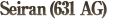
<style>
.page{position:relative;width:118px;height:19px;background:#ffffff}
.page>*{position:absolute;margin:0}
.t1{font:18px "RyuminPro-ExBold";letter-spacing:-0.08em;color:#4a3f32;font-weight:bold;scale:0.9 1}
</style>
<div class="page">
<p class="t1" style="left:0px;top:0px;width:107px;height:19px">Seiran (631 AG)</p>
</div>
